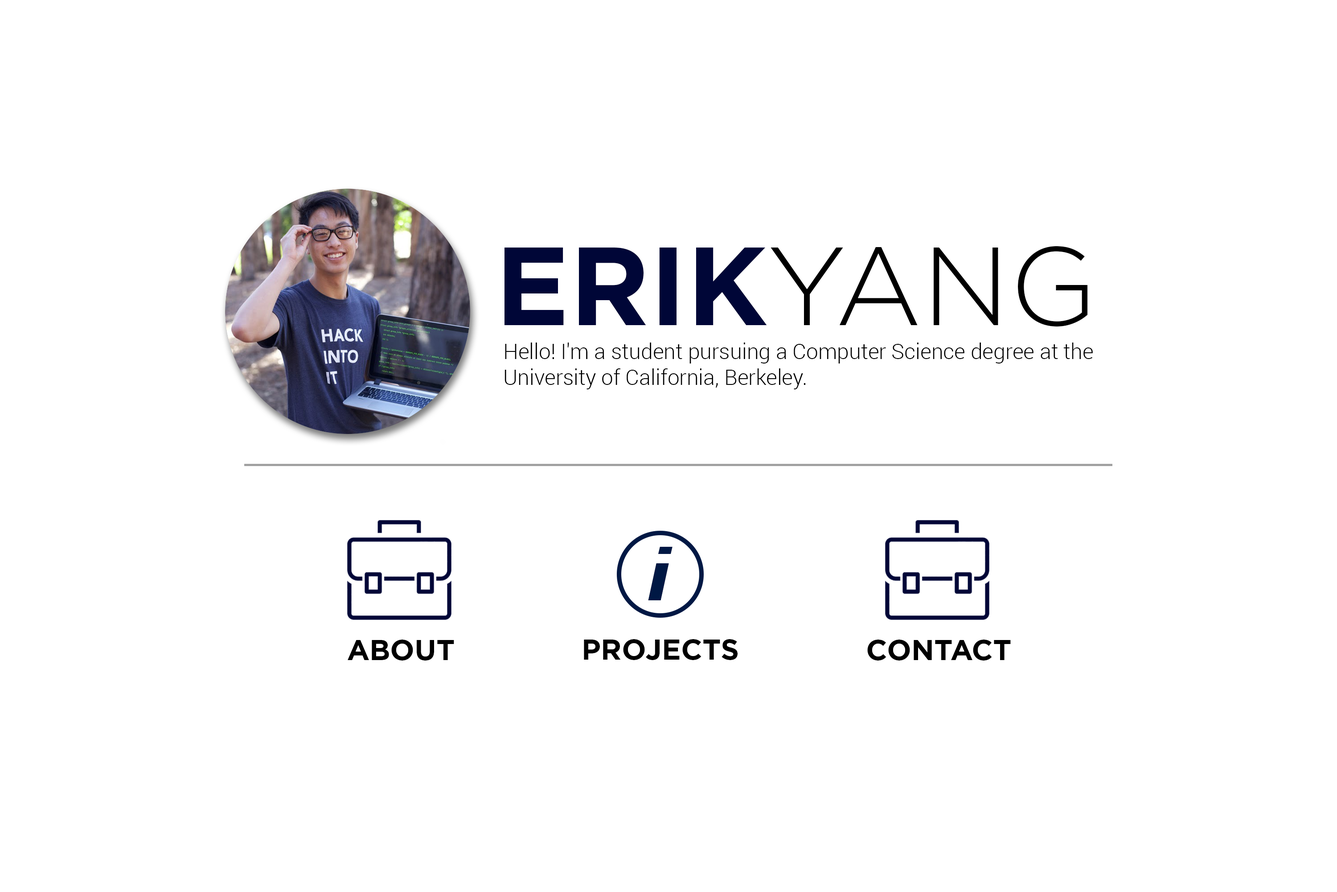
<style>
.page{position:relative;width:1337px;height:892px;background:#ffffff}
.page>*{position:absolute;margin:0}
.t1{font:110.8px "Gotham-Bold";color:#000637}
.t2{font:110.8px "GothamPro-Light";color:#000000}
.t3{font:21.4px "Roboto-Light";color:#000000}
.t4{font:70.1px "Roboto-BlackItalic";color:#001844;scale:1.1 1}
.t5{font:28.8px "Gotham-Bold";color:#000000}
</style>
<div class="page">
<p class="t1" style="left:505px;top:246px;width:583px;height:81px">ERIK<span class="t2">YANG</span></p>
<p class="t3" style="left:505px;top:342px;width:588px;height:47px">Hello! I'm a student pursuing a Computer Science degree at the University of California, Berkeley.</p>
<p class="t4" style="left:648px;top:547px;width:25px;height:53px">i</p>
<p class="t5" style="left:348px;top:639px;width:106px;height:21px">ABOUT</p>
<p class="t5" style="left:584px;top:639px;width:154px;height:21px">PROJECTS</p>
<p class="t5" style="left:868px;top:639px;width:143px;height:21px">CONTACT</p>
</div>
